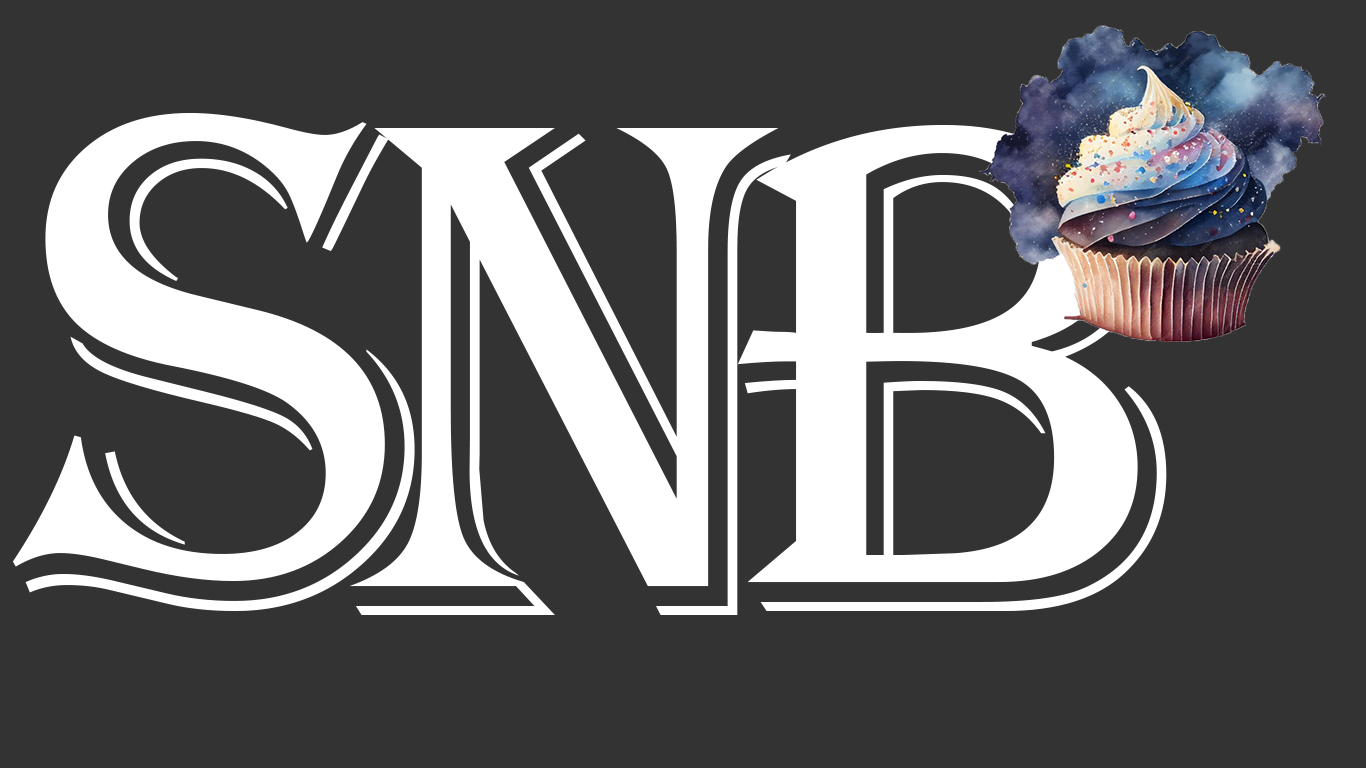
<style>
.page{position:relative;width:1366px;height:768px;background:#333333}
.page>*{position:absolute;margin:0}
.t1{font:724.4px "Algerian";color:#ffffff}
.t2{font:718.3px "Algerian";color:#ffffff}
.t3{font:730.5px "Algerian";color:#ffffff}
</style>
<div class="page">
<p class="t1" style="left:12px;top:113px;width:403px;height:498px">s</p>
<p class="t2" style="left:737px;top:125px;width:430px;height:486px">b</p>
<p class="t3" style="left:349px;top:128px;width:442px;height:487px">n</p>
</div>
